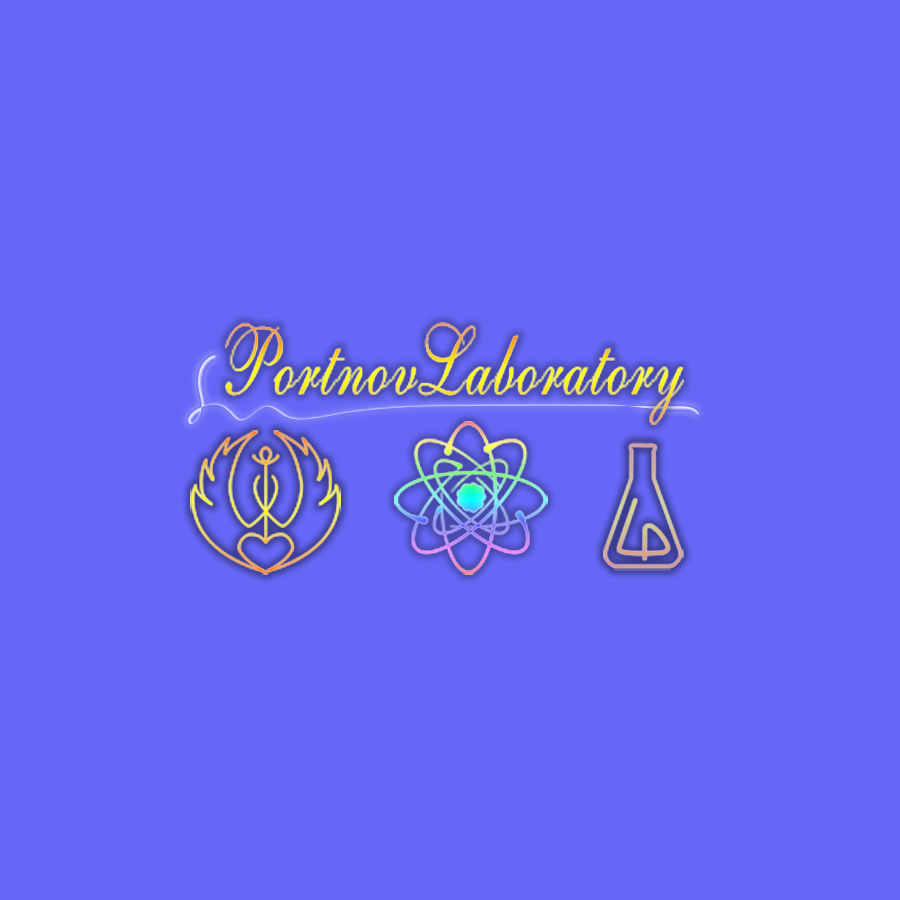
<style>
.page{position:relative;width:900px;height:900px;background:#6567f7}
.page>*{position:absolute;margin:0}
.t1{font:97.2px "AllegrettoScriptOne";letter-spacing:0.028em;color:#fff600;scale:0.67 1}
</style>
<div class="page">
<p class="t1" style="left:225px;top:322px;width:459px;height:103px">PortnovLaboratory</p>
</div>
